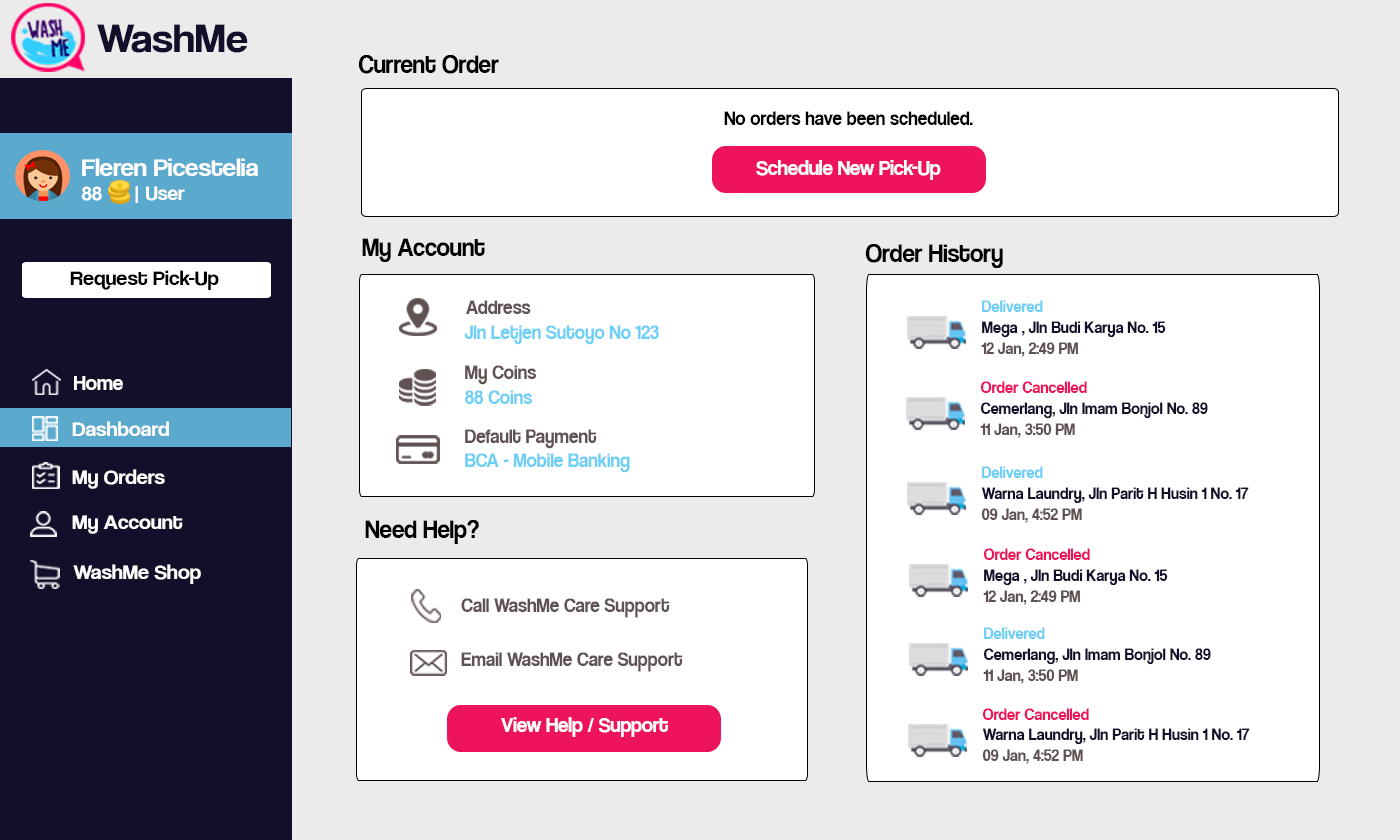
<style>
.page{position:relative;width:1400px;height:840px;background:#ffffff}
.page>*{position:absolute;margin:0}
.t1{font:42.1px "CoolveticaRg-Regular";color:#120f2b;scale:1.05 1}
.t2{font:25.5px "CoolveticaRg-Regular";color:#000000;scale:0.96 1}
.t3{font:19.9px "CoolveticaRg-Regular";color:#000000;scale:0.96 1}
.t4{font:25.2px "CoolveticaRg-Regular";color:#ffffff;scale:1.05 1}
.t5{font:20px "CoolveticaRg-Regular";color:#ffffff;scale:1.05 1}
.t6{font:21.3px "CoolveticaRg-Regular";color:#ffffff;scale:0.96 1}
.t7{font:21px "CoolveticaRg-Regular";color:#000000;scale:1.05 1}
.t8{font:19.9px "CoolveticaRg-Regular";color:#605252;scale:0.96 1}
.t9{font:17px "CoolveticaRg-Regular";color:#6dcff6;scale:0.96 1}
.t10{font:19.9px "CoolveticaRg-Regular";color:#6dcff6;scale:0.96 1}
.t11{font:17px "CoolveticaRg-Regular";color:#120f2b;scale:0.96 1}
.t12{font:17px "CoolveticaRg-Regular";color:#605252;scale:0.96 1}
.t13{font:21px "CoolveticaRg-Regular";color:#ffffff}
.t14{font:17px "CoolveticaRg-Regular";color:#ed145b;scale:0.96 1}
.t15{font:21px "CoolveticaRg-Regular";color:#ffffff;scale:1.05 1}
</style>
<div class="page">
<p class="t1" style="left:97px;top:24px;width:151px;height:29px">WashMe</p>
<p class="t2" style="left:358px;top:55px;width:141px;height:19px">Current Order</p>
<p class="t3" style="left:724px;top:111px;width:249px;height:14px">No orders have been scheduled.</p>
<p class="t4" style="left:81px;top:158px;width:177px;height:45px">Fleren Picestelia<br><span class="t5">88      | User</span></p>
<p class="t6" style="left:756px;top:160px;width:185px;height:20px">Schedule New Pick-Up</p>
<p class="t2" style="left:362px;top:238px;width:123px;height:24px">My Account</p>
<p class="t2" style="left:865px;top:244px;width:138px;height:24px">Order History</p>
<p class="t7" style="left:70px;top:270px;width:149px;height:20px">Request Pick-Up</p>
<p class="t8" style="left:466px;top:300px;width:65px;height:14px">Address</p>
<p class="t9" style="left:982px;top:300px;width:61px;height:12px">Delivered</p>
<p class="t10" style="left:464px;top:325px;width:195px;height:20px">Jln Letjen Sutoyo No 123</p>
<p class="t11" style="left:982px;top:321px;width:184px;height:17px">Mega , Jln Budi Karya No. 15</p>
<p class="t12" style="left:981px;top:342px;width:97px;height:15px">12 Jan, 2:49 PM</p>
<p class="t8" style="left:465px;top:365px;width:71px;height:20px">My Coins</p>
<p class="t13" style="left:74px;top:376px;width:49px;height:14px">Home</p>
<p class="t10" style="left:465px;top:390px;width:67px;height:14px">88 Coins</p>
<p class="t14" style="left:980px;top:381px;width:107px;height:12px">Order Cancelled</p>
<p class="t11" style="left:980px;top:402px;width:228px;height:17px">Cemerlang, Jln Imam Bonjol No. 89</p>
<p class="t15" style="left:72px;top:421px;width:97px;height:15px">Dashboard</p>
<p class="t12" style="left:980px;top:423px;width:95px;height:15px">11 Jan, 3:50 PM</p>
<p class="t8" style="left:465px;top:429px;width:132px;height:20px">Default Payment</p>
<p class="t10" style="left:465px;top:453px;width:165px;height:20px">BCA - Mobile Banking</p>
<p class="t15" style="left:72px;top:469px;width:93px;height:20px">My Orders</p>
<p class="t9" style="left:982px;top:466px;width:61px;height:12px">Delivered</p>
<p class="t11" style="left:981px;top:487px;width:268px;height:17px">Warna Laundry, Jln Parit H Husin 1 No. 17</p>
<p class="t12" style="left:981px;top:508px;width:101px;height:15px">09 Jan, 4:52 PM</p>
<p class="t15" style="left:72px;top:515px;width:111px;height:19px">My Account</p>
<p class="t2" style="left:365px;top:520px;width:114px;height:24px">Need Help?</p>
<p class="t14" style="left:983px;top:548px;width:107px;height:12px">Order Cancelled</p>
<p class="t15" style="left:73px;top:564px;width:128px;height:20px">WashMe Shop</p>
<p class="t11" style="left:984px;top:569px;width:184px;height:17px">Mega , Jln Budi Karya No. 15</p>
<p class="t12" style="left:983px;top:590px;width:97px;height:15px">12 Jan, 2:49 PM</p>
<p class="t8" style="left:461px;top:598px;width:209px;height:20px">Call WashMe Care Support</p>
<p class="t9" style="left:984px;top:627px;width:61px;height:12px">Delivered</p>
<p class="t8" style="left:461px;top:652px;width:222px;height:20px">Email WashMe Care Support</p>
<p class="t11" style="left:983px;top:648px;width:228px;height:17px">Cemerlang, Jln Imam Bonjol No. 89</p>
<p class="t12" style="left:983px;top:669px;width:95px;height:15px">11 Jan, 3:50 PM</p>
<p class="t14" style="left:982px;top:708px;width:107px;height:12px">Order Cancelled</p>
<p class="t6" style="left:501px;top:717px;width:167px;height:20px">View Help / Support</p>
<p class="t11" style="left:982px;top:728px;width:268px;height:17px">Warna Laundry, Jln Parit H Husin 1 No. 17</p>
<p class="t12" style="left:982px;top:749px;width:101px;height:15px">09 Jan, 4:52 PM</p>
</div>
